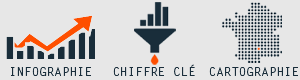
<style>
.page{position:relative;width:300px;height:80px;background:#e7e7e7}
.page>*{position:absolute;margin:0}
.t1{font:12px "LetterGothicStd";color:#192d3a;scale:1.05 1}
</style>
<div class="page">
<p class="t1" style="left:113px;top:64px;width:82px;height:12px">CHIFFRE CLÉ</p>
<p class="t1" style="left:11px;top:67px;width:80px;height:9px">INFOGRAPHIE</p>
<p class="t1" style="left:209px;top:67px;width:89px;height:9px">CARTOGRAPHIE</p>
</div>
